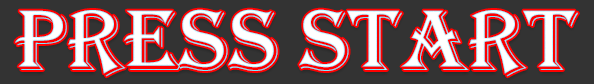
<style>
.page{position:relative;width:594px;height:84px;background:#333333}
.page>*{position:absolute;margin:0}
.t1{font:88.9px "Algerian";color:#ffffff}
</style>
<div class="page">
<p class="t1" style="left:15px;top:9px;width:563px;height:68px">press START</p>
</div>
